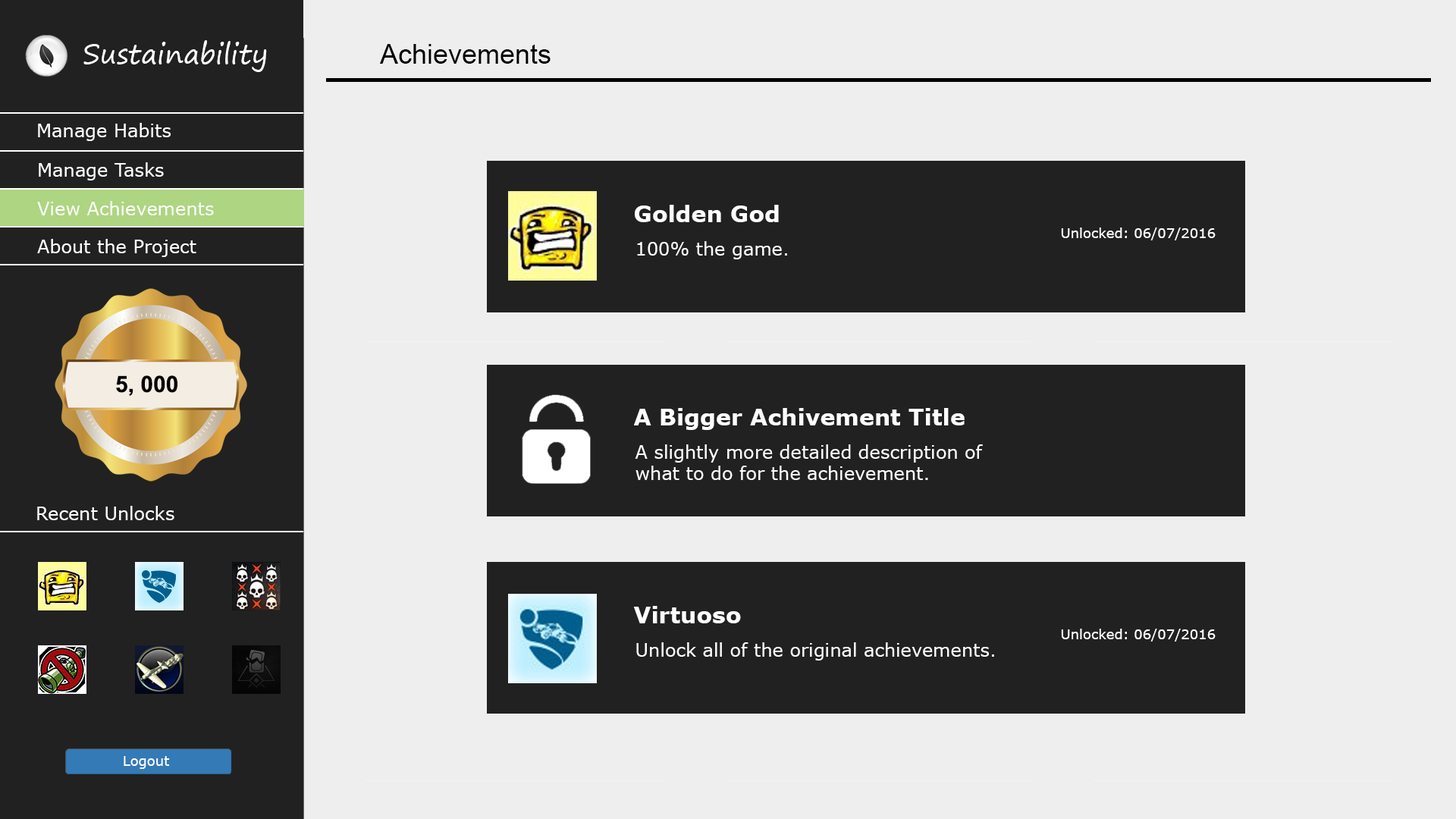
<style>
.page{position:relative;width:1456px;height:819px;background:#eeeeee}
.page>*{position:absolute;margin:0}
.t1{font:27.3px "SegoePrint";color:#ffffff}
.t2{font:27.3px "ArialMT";color:#eeeeee}
.t3{font:27.3px "ArialMT";color:#000000}
.t4{font:18.2px "Verdana";color:#ffffff}
.t5{font:22.7px "Verdana-Bold";color:#fefefe}
.t6{font:13.6px "Verdana";color:#fefefe}
.t7{font:18.2px "Verdana";color:#fefefe}
.t8{font:22.7px "Arial-BoldMT";color:#000000}
.t9{font:13.6px "Verdana";color:#ffffff}
</style>
<div class="page">
<p class="t1" style="left:83px;top:40px;width:184px;height:32px">Sustainability</p>
<p class="t2" style="left:380px;top:44px;width:354px;height:25px"><span class="t3">Achievements</span>Manage Habits</p>
<p class="t4" style="left:38px;top:123px;width:133px;height:18px">Manage Habits</p>
<p class="t4" style="left:39px;top:162px;width:125px;height:18px">Manage Tasks</p>
<p class="t4" style="left:37px;top:201px;width:177px;height:14px">View Achievements</p>
<p class="t5" style="left:635px;top:205px;width:144px;height:17px">Golden God</p>
<p class="t6" style="left:1061px;top:227px;width:155px;height:13px">Unlocked: 06/07/2016</p>
<p class="t4" style="left:37px;top:239px;width:159px;height:18px">About the Project</p>
<p class="t7" style="left:637px;top:241px;width:150px;height:18px">100% the game.</p>
<p class="t8" style="left:116px;top:375px;width:61px;height:21px">5, 000</p>
<p class="t5" style="left:634px;top:408px;width:331px;height:22px">A Bigger Achivement Title</p>
<p class="t7" style="left:635px;top:444px;width:348px;height:36px">A slightly more detailed description of <br>what to do for the achievement.</p>
<p class="t4" style="left:37px;top:506px;width:137px;height:14px">Recent Unlocks</p>
<p class="t5" style="left:633px;top:606px;width:108px;height:17px">Virtuoso</p>
<p class="t6" style="left:1061px;top:629px;width:155px;height:13px">Unlocked: 06/07/2016</p>
<p class="t7" style="left:636px;top:642px;width:358px;height:18px">Unlock all of the original achievements.</p>
<p class="t9" style="left:124px;top:756px;width:46px;height:13px">Logout</p>
</div>
